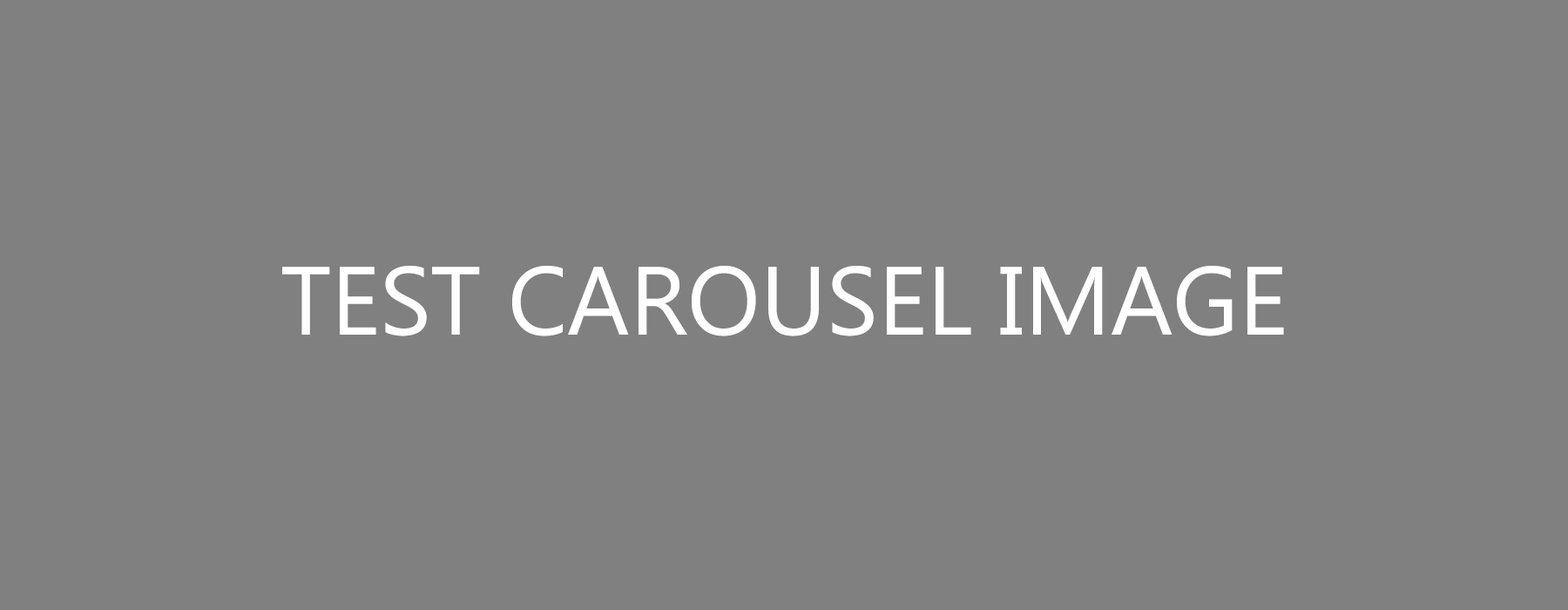
<style>
.page{position:relative;width:1568px;height:610px;background:#808080}
.page>*{position:absolute;margin:0}
.t1{font:96.5px "MicrosoftPhagsPa";color:#ffffff}
</style>
<div class="page">
<p class="t1" style="left:282px;top:266px;width:1002px;height:70px">TEST CAROUSEL IMAGE</p>
</div>
